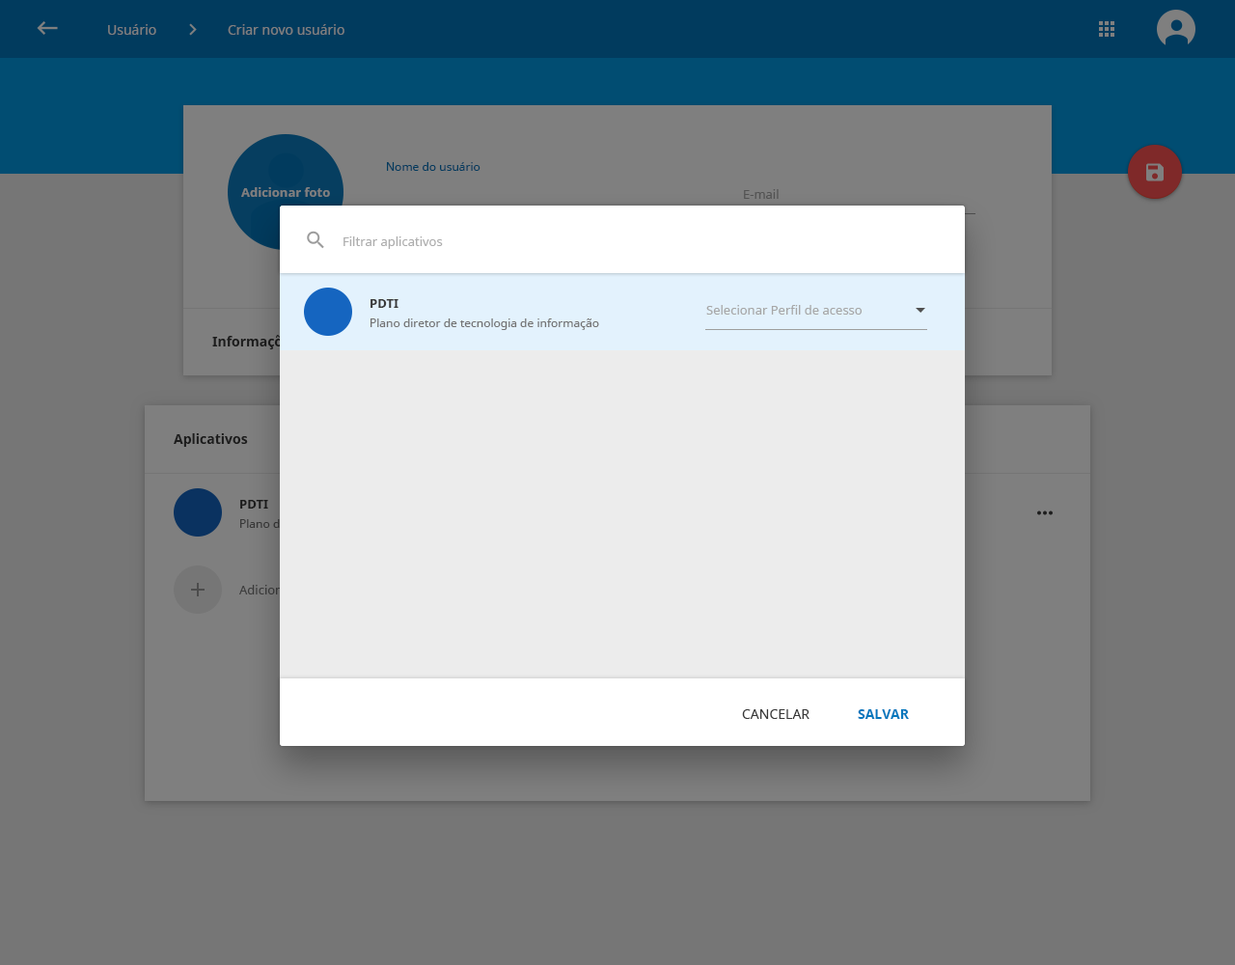
<style>
.page{position:relative;width:1235px;height:965px;background:#767676}
.page>*{position:absolute;margin:0}
.t1{font:13.5px "NotoSans";color:#7f7f7f}
.t2{font:11.6px "NotoSans";color:#013b5e}
.t3{font:12.5px "NotoSans-Bold";color:#7f7f7f}
.t4{font:12.5px "NotoSans";color:#525252}
.t5{font:12.5px "NotoSans";color:#aeaeae}
.t6{font:12.5px "NotoSans-Bold";color:#393939}
.t7{font:12.5px "NotoSans";color:#a7a7a7}
.t8{font:11.6px "NotoSans";color:#737373}
.t9{font:13.5px "NotoSans-Bold";color:#1c1c1c}
.t10{font:12.5px "NotoSans-Bold";color:#1b1b1b}
.t11{font:13.5px "NotoSans";color:#393939}
.t12{font:13.5px "NotoSans-Bold";color:#0277bd}
</style>
<div class="page">
<p class="t1" style="left:108px;top:24px;width:48px;height:11px">Usuário</p>
<p class="t1" style="left:228px;top:24px;width:117px;height:11px">Criar novo usuário</p>
<p class="t2" style="left:387px;top:162px;width:94px;height:9px">Nome do usuário</p>
<p class="t3" style="left:241px;top:187px;width:89px;height:10px">Adicionar foto</p>
<p class="t4" style="left:744px;top:189px;width:35px;height:10px">E-mail</p>
<p class="t5" style="left:344px;top:236px;width:99px;height:13px">Filtrar aplicativos</p>
<p class="t6" style="left:371px;top:299px;width:28px;height:9px">PDTI</p>
<p class="t7" style="left:707px;top:305px;width:155px;height:10px">Selecionar Perfil de acesso</p>
<p class="t8" style="left:371px;top:319px;width:228px;height:11px">Plano diretor de tecnologia de informação</p>
<p class="t9" style="left:212px;top:335px;width:85px;height:14px">Informações</p>
<p class="t9" style="left:174px;top:433px;width:74px;height:14px">Aplicativos</p>
<p class="t10" style="left:240px;top:500px;width:28px;height:9px">PDTI</p>
<p class="t11" style="left:742px;top:709px;width:68px;height:10px">CANCELAR</p>
<p class="t12" style="left:858px;top:709px;width:51px;height:10px">SALVAR</p>
</div>
